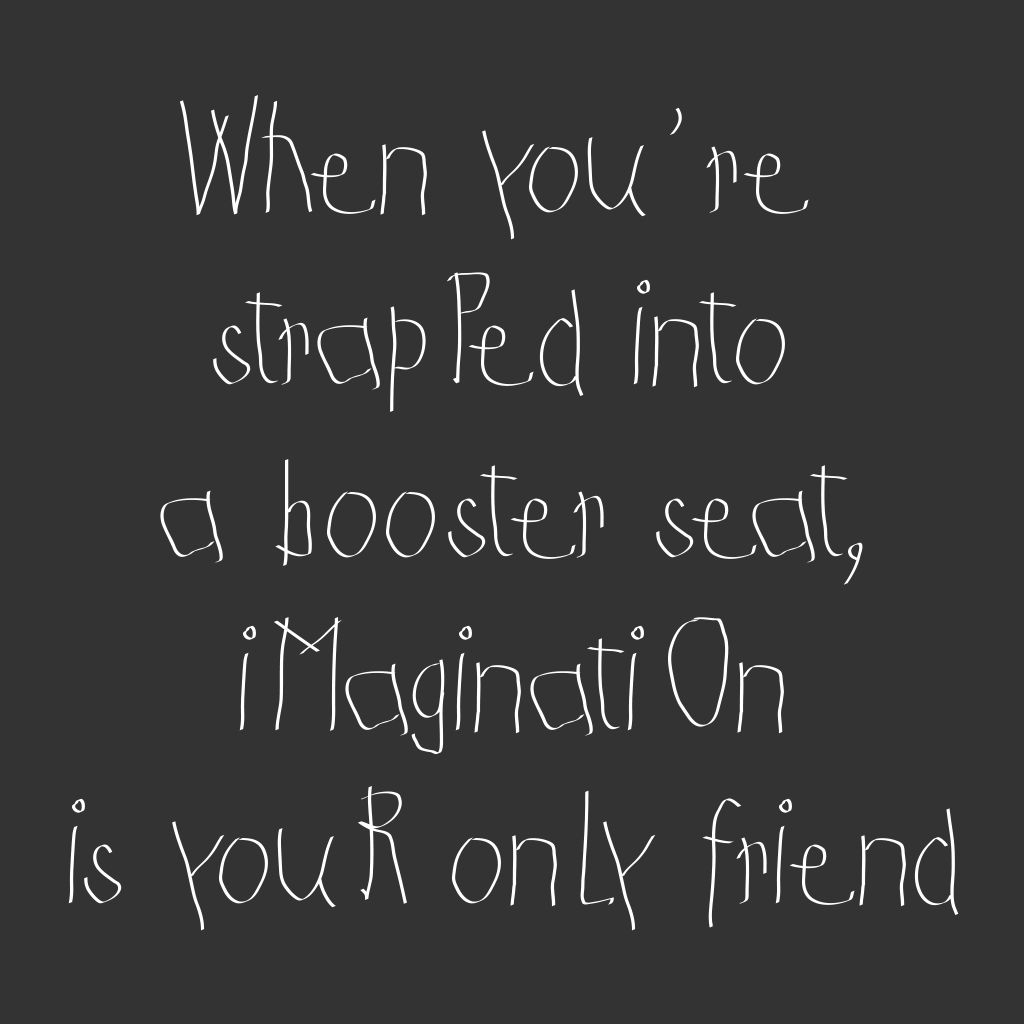
<style>
.page{position:relative;width:1024px;height:1024px;background:#333333}
.page>*{position:absolute;margin:0}
.t1{font:144px "KidsFirstPrintFont";color:#ffffff}
</style>
<div class="page">
<p class="t1" style="left:68px;top:95px;width:891px;height:836px;text-align:center">When you’re <br>strapPed into <br>a booster seat,<br>iMaginatiOn<br>is youR onLy friend</p>
</div>
